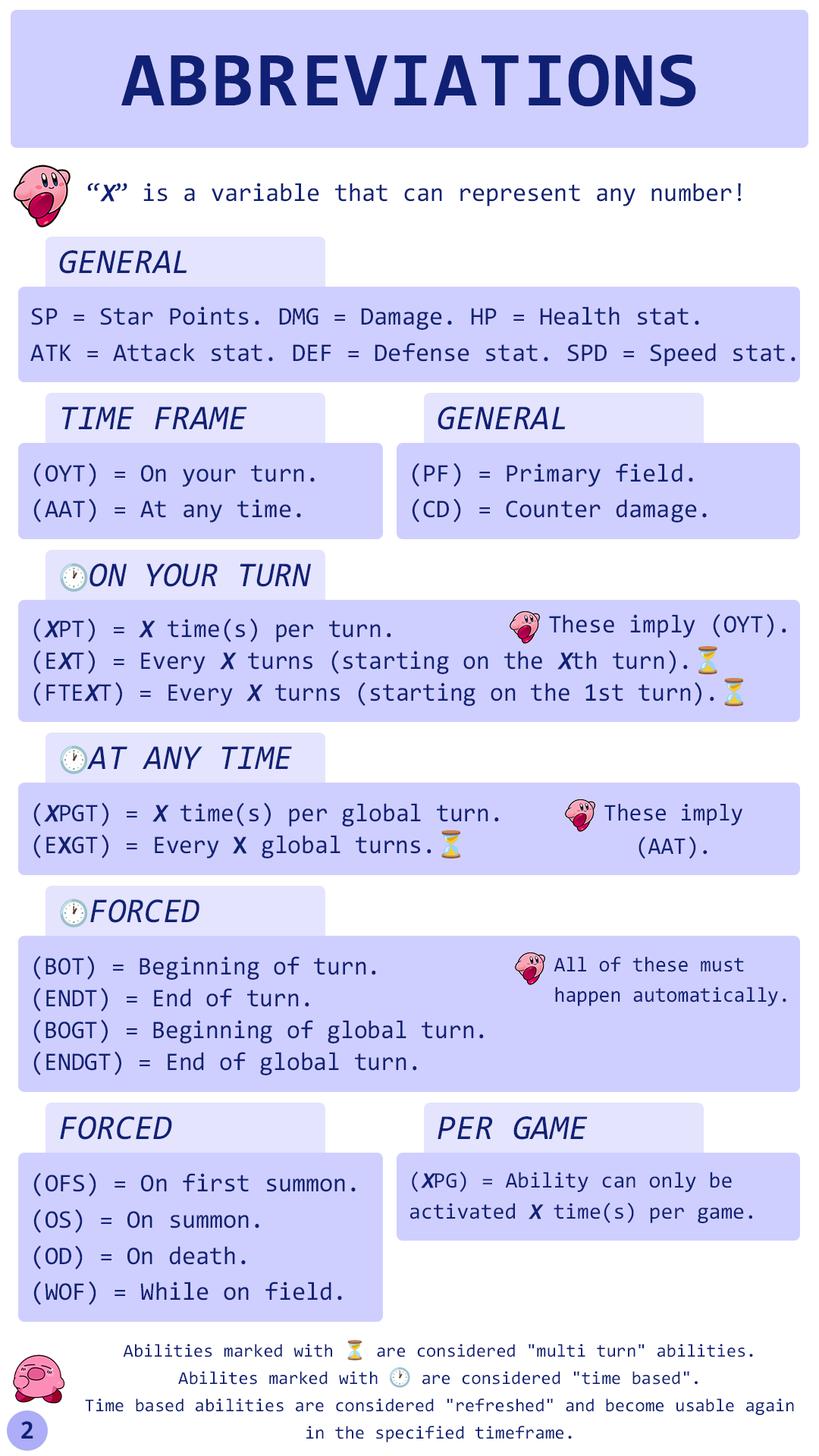
<style>
.page{position:relative;width:819px;height:1456px;background:#cfcfff}
.page>*{position:absolute;margin:0}
.t1{font:78.3px "Consolas-Bold";letter-spacing:0.02em;color:#102175;text-transform:uppercase}
.t2{font:25.5px "Consolas";color:#102175}
.t3{font:25.5px "Consolas";color:#102175;font-weight:bold;font-style:italic}
.t4{font:35px "Consolas-Italic";color:#102175}
.t5{font:35px "Consolas-Italic";color:#102175;scale:0.96 1}
.t6{font:25.5px "NotoColorEmoji-SVG";color:#102175;scale:0.96 1}
.t7{font:25.5px "Consolas";color:#102175;scale:0.96 1}
.t8{font:25.5px/31.8px "Consolas";color:#102175;scale:0.96 1}
.t9{font:25.5px/31.8px "Consolas";color:#102175;font-weight:bold;font-style:italic;scale:0.96 1}
.t10{font:25.5px/31.8px "NotoColorEmoji-SVG";color:#102175;scale:0.96 1}
.t11{font:25.5px/31.8px "Consolas";color:#102175;font-weight:bold;scale:0.96 1}
.t12{font:24.1px "Consolas";color:#102175;scale:0.96 1}
.t13{font:35px "Consolas-Italic";scale:0.96 1}
.t14{font:25.5px "NotoColorEmoji-SVG";scale:0.96 1}
.t15{font:21.3px "Consolas";color:#102175;scale:0.96 1}
.t16{font:25.6px "Consolas";color:#102175}
.t17{font:22.2px "Consolas";color:#102175}
.t18{font:22.2px "Consolas";color:#102175;font-weight:bold;font-style:italic}
.t19{font:18.2px/27.3px "Consolas";color:#102175}
.t20{font:18.2px/27.3px "NotoColorEmoji-SVG";color:#102175}
.t21{font:26.4px "Consolas-Bold";color:#102175}
</style>
<div class="page">
<p class="t1" style="left:121px;top:55px;width:575px;height:52px">Abbreviations</p>
<p class="t2" style="left:87px;top:183px;width:655px;height:23px">“<span class="t3">X</span>” is a variable that can represent any number!</p>
<p class="t4" style="left:59px;top:250px;width:128px;height:24px">GENERAL</p>
<p class="t2" style="left:30px;top:306px;width:765px;height:60px">SP = Star Points. DMG = Damage. HP = Health stat.<br>ATK = Attack stat. DEF = Defense stat. SPD = Speed stat.</p>
<p class="t4" style="left:61px;top:406px;width:186px;height:23px">TIME FRAME</p>
<p class="t4" style="left:438px;top:406px;width:128px;height:24px">GENERAL</p>
<p class="t2" style="left:33px;top:463px;width:282px;height:59px">(OYT) = On your turn.<br>(AAT) = At any time.</p>
<p class="t2" style="left:412px;top:463px;width:295px;height:59px">(PF) = Primary field.<br>(CD) = Counter damage.</p>
<p class="t5" style="left:60px;top:563px;width:251px;height:29px"><span class="t6">🕐</span>ON YOUR TURN</p>
<p class="t7" style="left:549px;top:613px;width:237px;height:25px">These imply (OYT).</p>
<p class="t8" style="left:33px;top:618px;width:710px;height:89px">(<span class="t9">X</span>PT) = <span class="t9">X</span> time(s) per turn.<br>(E<span class="t9">X</span>T) = Every <span class="t9">X</span> turns (starting on the <span class="t9">X</span>th turn).<span class="t10">⏳<br></span>(FTE<span class="t9">X</span>T) = Every <span class="t9">X</span> turns (starting on the 1st turn).<span class="t10">⏳</span></p>
<p class="t5" style="left:60px;top:745px;width:232px;height:29px"><span class="t6">🕐</span>AT ANY TIME</p>
<p class="t8" style="left:33px;top:802px;width:466px;height:56px">(<span class="t9">X</span>PGT) = <span class="t9">X</span> time(s) per global turn.<br>(E<span class="t11">X</span>GT) = Every <span class="t11">X</span> global turns.<span class="t10">⏳</span></p>
<p class="t12" style="left:604px;top:804px;width:138px;height:55px;text-align:center">These imply<br>(AAT).</p>
<p class="t13" style="left:60px;top:899px;width:139px;height:28px"><span class="t14">🕐</span>FORCED</p>
<p class="t8" style="left:33px;top:955px;width:451px;height:120px">(BOT) = Beginning of turn.<br>(ENDT) = End of turn.<br>(BOGT) = Beginning of global turn.<br>(ENDGT) = End of global turn.</p>
<p class="t15" style="left:554px;top:956px;width:232px;height:50px">All of these must happen automatically.</p>
<p class="t4" style="left:60px;top:1116px;width:112px;height:24px">FORCED</p>
<p class="t4" style="left:438px;top:1116px;width:150px;height:24px">PER GAME</p>
<p class="t16" style="left:33px;top:1172px;width:323px;height:133px">(OFS) = On first summon.<br>(OS) = On summon.<br>(OD) = On death.<br>(WOF) = While on field.</p>
<p class="t17" style="left:409px;top:1171px;width:343px;height:52px">(<span class="t18">X</span>PG) = Ability can only be activated <span class="t18">X</span> time(s) per game.</p>
<p class="t19" style="left:85px;top:1340px;width:709px;height:102px;text-align:center">Abilities marked with <span class="t20">⏳</span> are considered "multi turn" abilities.<br>Abilites marked with <span class="t20">🕐</span> are considered "time based".<br>Time based abilities are considered "refreshed" and become usable again in the specified timeframe.</p>
<p class="t21" style="left:21px;top:1421px;width:12px;height:18px">2</p>
</div>
